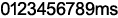
<style>
.page{position:relative;width:118px;height:18px;background:#ffffff}
.page>*{position:absolute;margin:0}
.t1{font:18px "ArialMT";color:#000000}
</style>
<div class="page">
<p class="t1" style="left:1px;top:2px;width:117px;height:14px">0123456789ms</p>
</div>
